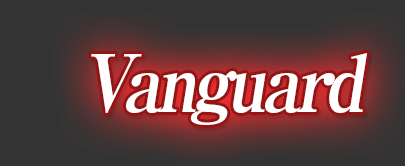
<style>
.page{position:relative;width:405px;height:166px;background:#333333}
.page>*{position:absolute;margin:0}
.t1{font:80px "RyuminPro-ExBold";letter-spacing:-0.08em;color:#ffffff;font-style:italic;scale:0.9 1}
</style>
<div class="page">
<p class="t1" style="left:91px;top:53px;width:276px;height:72px">Vanguard</p>
</div>
